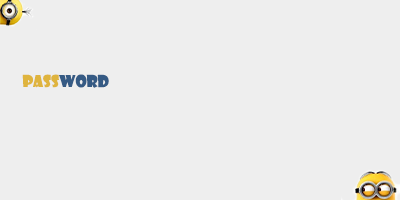
<style>
.page{position:relative;width:400px;height:200px;background:#eeeeee}
.page>*{position:absolute;margin:0}
.t1{font:16px "ShowcardGothic-Reg";color:#dfb43e}
.t2{font:16px "ShowcardGothic-Reg";color:#355a84}
</style>
<div class="page">
<p class="t1" style="left:22px;top:74px;width:87px;height:14px">Pass<span class="t2">word</span></p>
</div>
